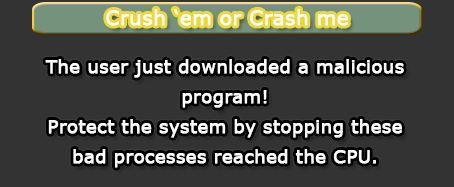
<style>
.page{position:relative;width:454px;height:187px;background:#333333}
.page>*{position:absolute;margin:0}
.t1{font:20px "Verdana";color:#ffffff;font-weight:bold}
.t2{font:18px/30px "Verdana";color:#ffffff;font-weight:bold}
</style>
<div class="page">
<p class="t1" style="left:106px;top:9px;width:242px;height:17px">Crush ‘em or Crash me</p>
<p class="t2" style="left:45px;top:59px;width:359px;height:109px;text-align:center">The user just downloaded a malicious program! <br>Protect the system by stopping these bad processes reached the CPU.</p>
</div>
